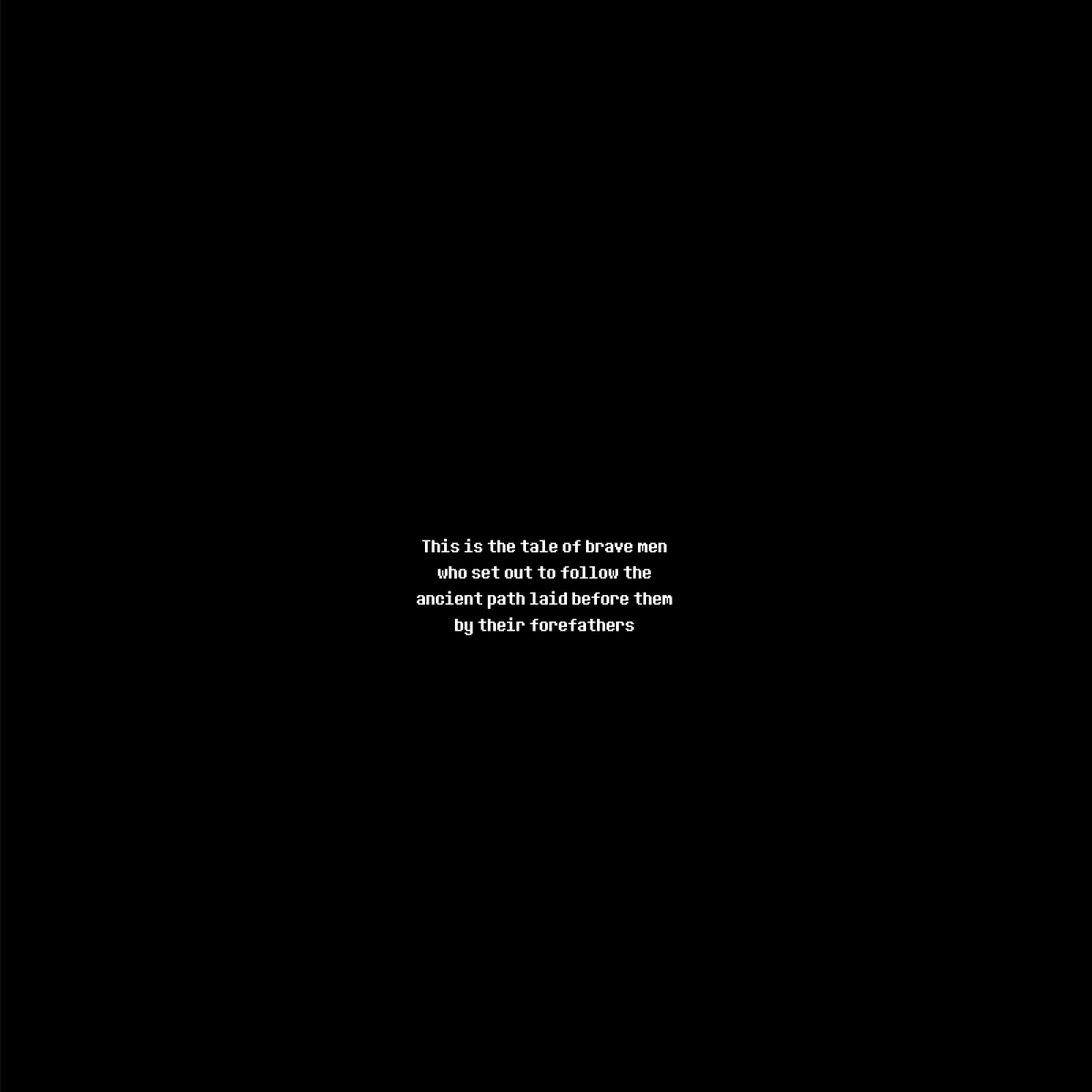
<style>
.page{position:relative;width:1092px;height:1092px;background:#000000}
.page>*{position:absolute;margin:0}
.t1{font:21.8px "8bitoperator-JVE";color:#ffffff}
</style>
<div class="page">
<p class="t1" style="left:417px;top:539px;width:255px;height:96px;text-align:center">This is the tale of brave men <br>who set out to follow the<br>ancient path laid before them <br>by their forefathers</p>
</div>
